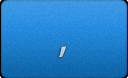
<style>
.page{position:relative;width:128px;height:78px}
.page>*{position:absolute;margin:0}
.t1{font:42px "MyriadPro-Regular";color:#b8cfe4}
</style>
<div class="page">
<p class="t1" style="left:59px;top:46px;width:7px;height:11px">,</p>
</div>
